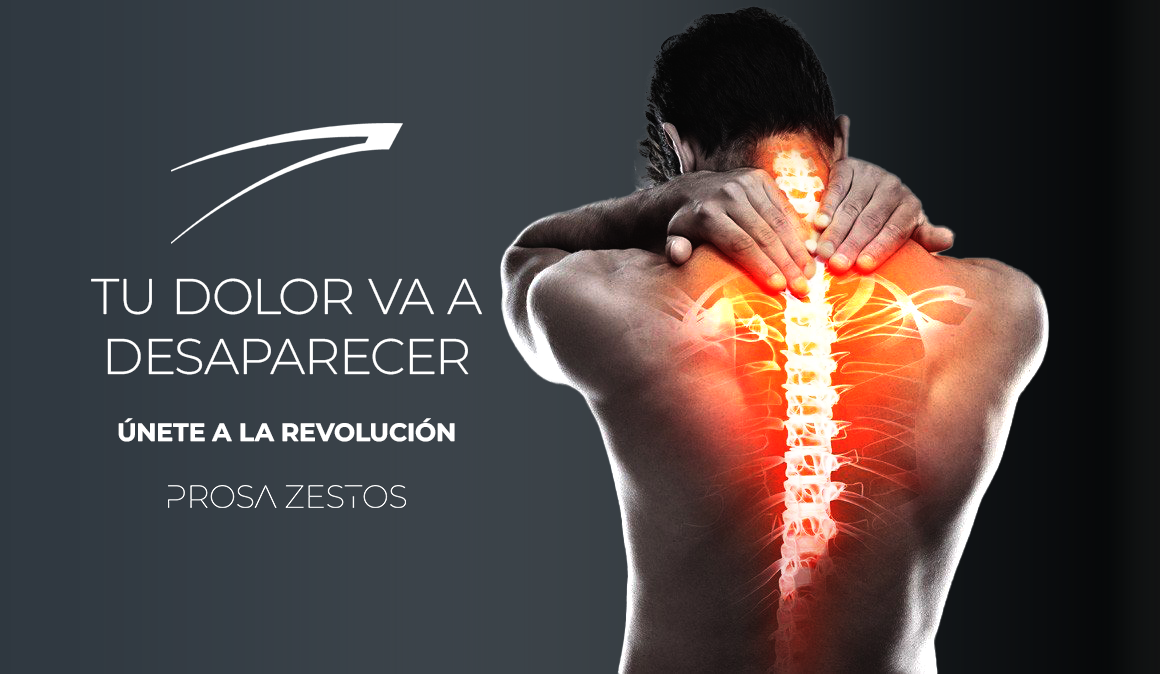
<style>
.page{position:relative;width:1160px;height:674px}
.page>*{position:absolute;margin:0}
.t1{font:50px "MontserratRoman-Light";color:#ffffff;font-style:italic}
.t2{font:25px "MontserratRoman-Bold";color:#ffffff;font-style:italic}
</style>
<div class="page">
<p class="t1" style="left:91px;top:278px;width:391px;height:97px;text-align:center">TU DOLOR VA A DESAPARECER</p>
<p class="t2" style="left:118px;top:418px;width:337px;height:24px">ÚNETE A LA REVOLUCIÓN</p>
</div>
